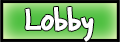
<style>
.page{position:relative;width:120px;height:42px}
.page>*{position:absolute;margin:0}
.t1{font:32px "Animated";color:#ffffff}
</style>
<div class="page">
<p class="t1" style="left:25px;top:7px;width:69px;height:35px">Lobby</p>
</div>
